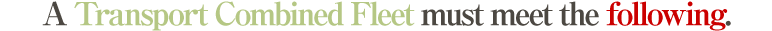
<style>
.page{position:relative;width:772px;height:31px;background:#ffffff}
.page>*{position:absolute;margin:0}
.t1{font:32px "RyuminPro-ExBold";letter-spacing:-0.08em;color:#b5c784}
.t2{font:32px "RyuminPro-ExBold";letter-spacing:-0.08em;color:#4c4842}
.t3{font:32px "RyuminPro-ExBold";letter-spacing:-0.08em;color:#cb0000}
</style>
<div class="page">
<p class="t1" style="left:42px;top:1px;width:689px;height:30px"><span class="t2">A </span>Transport Combined Fleet<span class="t2"> must meet the </span><span class="t3">following</span><span class="t2">.</span></p>
</div>
